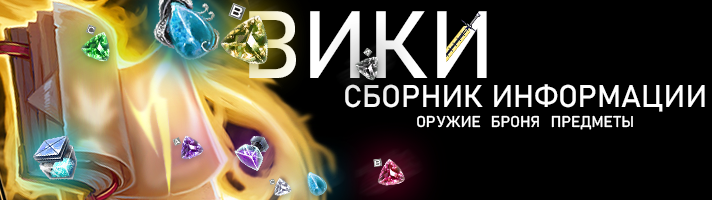
<style>
.page{position:relative;width:712px;height:200px;background:#000000}
.page>*{position:absolute;margin:0}
.t1{font:94px "Bahnschrift";color:#ffffff;text-transform:uppercase}
.t2{font:31px "Bahnschrift";color:#ffffff;text-transform:uppercase}
.t3{font:15.5px "Bahnschrift";color:#ffffff;text-transform:uppercase}
</style>
<div class="page">
<p class="t1" style="left:249px;top:11px;width:238px;height:67px">ВИКИ</p>
<p class="t2" style="left:345px;top:84px;width:360px;height:28px">Сборник информации</p>
<p class="t3" style="left:417px;top:115px;width:64px;height:13px">ОРУЖИЕ</p>
<p class="t3" style="left:491px;top:115px;width:48px;height:13px">БРОНЯ</p>
<p class="t3" style="left:551px;top:115px;width:82px;height:15px">ПРЕДМЕТЫ</p>
</div>
